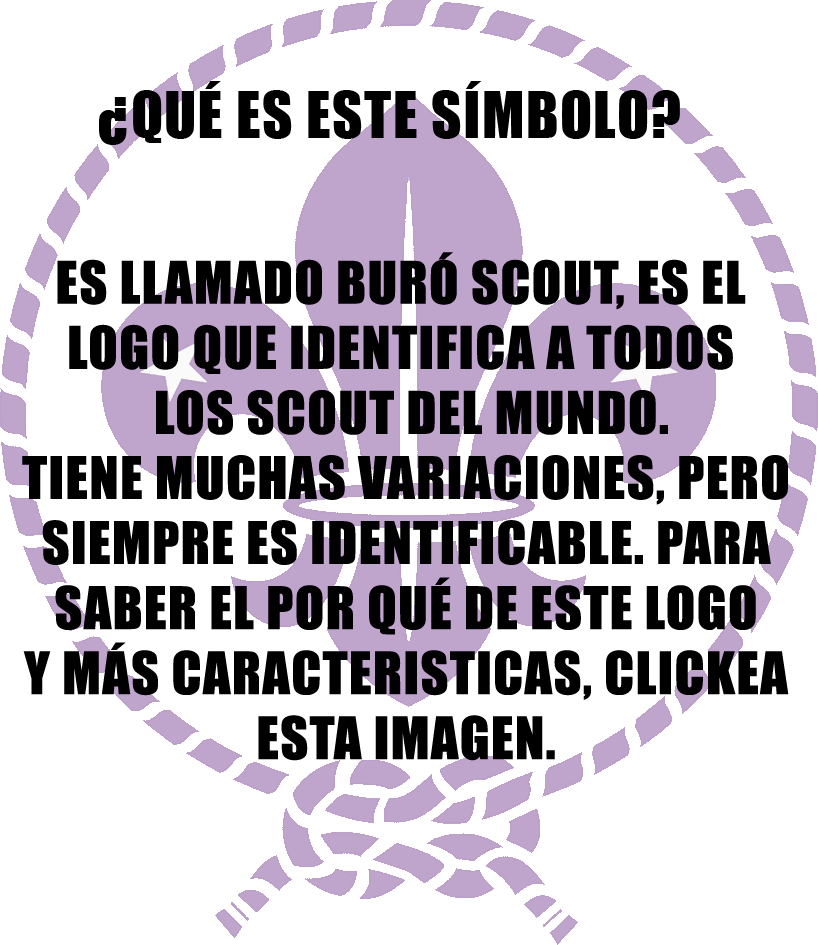
<style>
.page{position:relative;width:818px;height:945px;background:#ffffff}
.page>*{position:absolute;margin:0}
.t1{font:59.2px "Impact";letter-spacing:0.025em;color:#000000;text-transform:uppercase}
.t2{font:54.2px "Impact";letter-spacing:0.025em;color:#000000;text-transform:uppercase}
</style>
<div class="page">
<p class="t1" style="left:99px;top:81px;width:581px;height:64px">¿Qué es este símbolo?</p>
<p class="t2" style="left:22px;top:252px;width:767px;height:509px;text-align:center">Es llamado buró scout, es el <br>logo que identifica a todos <br> los scout del mundo.<br>tiene muchas variaciones, pero<br>siempre es identificable. para<br>saber el por qué de este logo<br>y más caracteristicas, clickea<br>esta imagen.</p>
</div>
